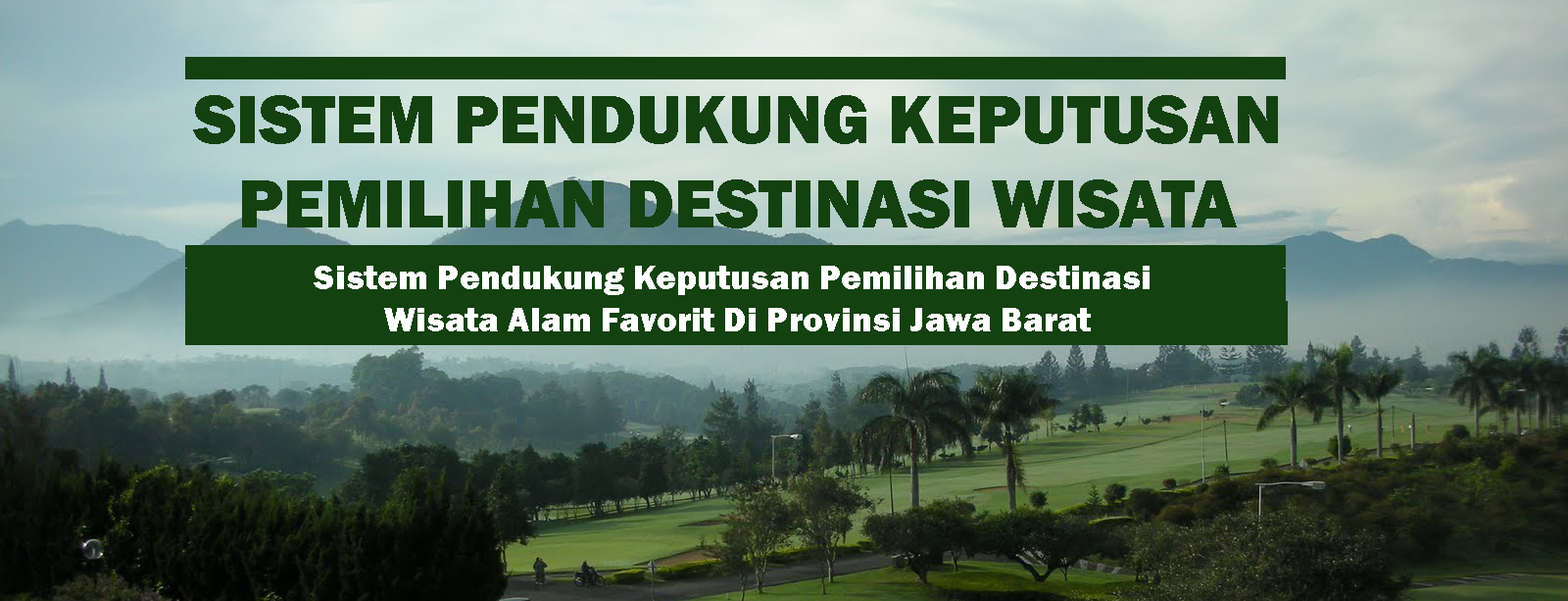
<style>
.page{position:relative;width:1568px;height:601px}
.page>*{position:absolute;margin:0}
.t1{font:70.6px "FranklinGothic-Heavy";color:#134110}
.t2{font:35.3px "FranklinGothic-Heavy";color:#ffffff}
</style>
<div class="page">
<p class="t1" style="left:193px;top:95px;width:1085px;height:133px;text-align:center">SISTEM PENDUKUNG KEPUTUSAN<br>PEMILIHAN DESTINASI WISATA</p>
<p class="t2" style="left:314px;top:266px;width:836px;height:65px;text-align:center">Sistem Pendukung Keputusan Pemilihan Destinasi <br>Wisata Alam Favorit Di Provinsi Jawa Barat</p>
</div>
